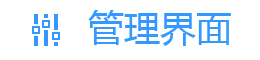
<style>
.page{position:relative;width:260px;height:60px;background:#ffffff}
.page>*{position:absolute;margin:0}
.t1{font:36px "MicrosoftYaHei";color:#3399ff}
</style>
<div class="page">
<p class="t1" style="left:88px;top:10px;width:143px;height:36px">管理界面</p>
</div>
